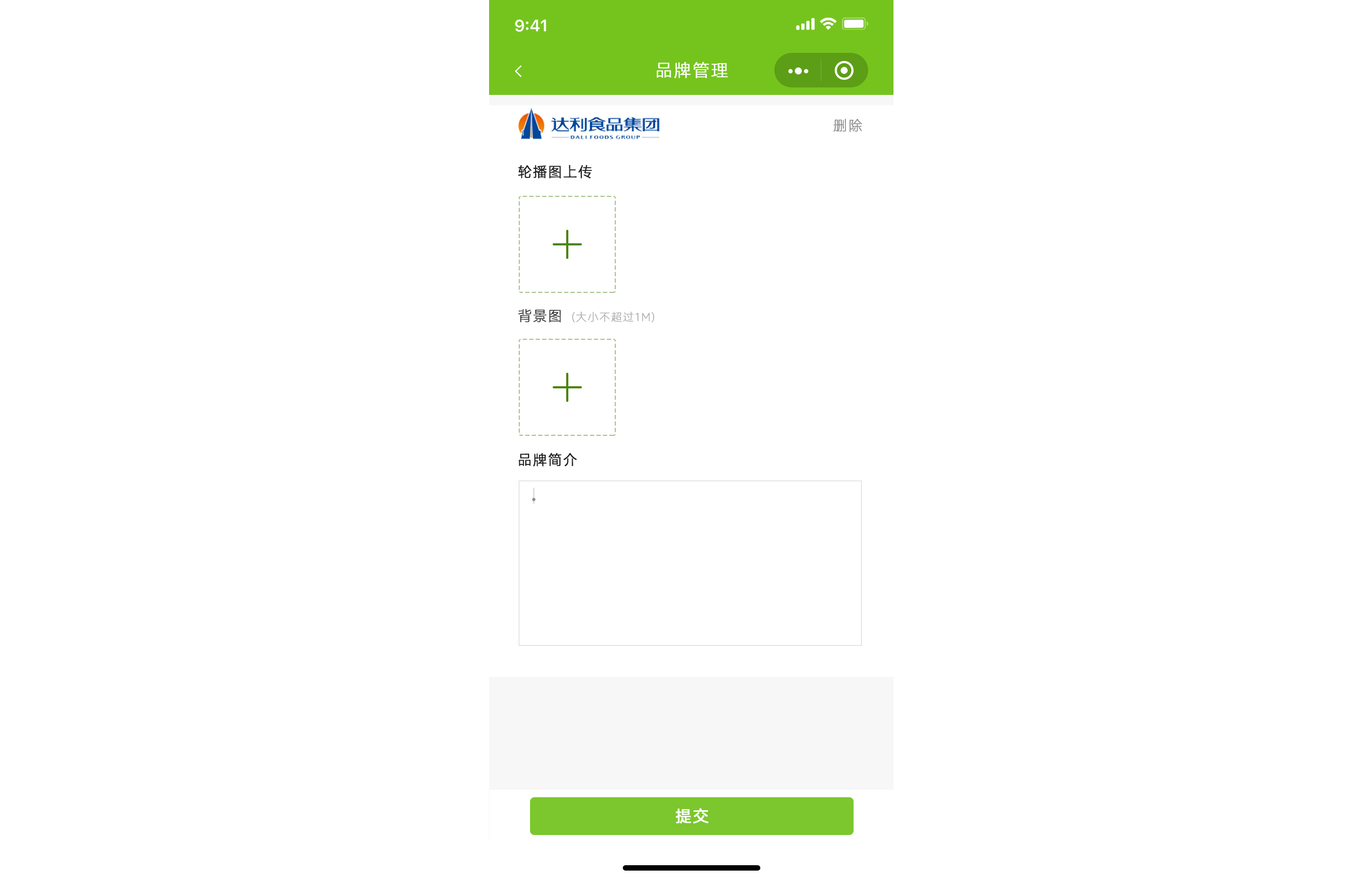
<style>
.page{position:relative;width:1361px;height:876px;background:#ffffff}
.page>*{position:absolute;margin:0}
.t1{font:17.3px "HarmonyOS_Sans_SC_Light";letter-spacing:0.04em;color:#ffffff;text-transform:uppercase;font-weight:bold}
.t2{font:14px "HarmonyOS_Sans_SC_Thin";letter-spacing:0.04em;color:#8d8d8d;text-transform:uppercase;font-weight:bold}
.t3{font:14px "HarmonyOS_Sans_SC_Light";letter-spacing:0.04em;color:#1c1c1c;text-transform:uppercase;font-weight:bold}
.t4{font:14px "HarmonyOS_Sans_SC_Thin";letter-spacing:0.04em;color:#1c1c1c;text-transform:uppercase;font-weight:bold}
.t5{font:10.8px "HarmonyOS_Sans_SC_Thin";letter-spacing:0.04em;color:#a7a7a7;text-transform:uppercase;font-weight:bold}
.t6{font:16.2px "HarmonyOS_Sans_SC";letter-spacing:0.04em;color:#ffffff;text-transform:uppercase;font-weight:bold}
</style>
<div class="page">
<p class="t1" style="left:657px;top:61px;width:71px;height:17px">品牌管理</p>
<p class="t2" style="left:833px;top:119px;width:29px;height:13px">删除</p>
<p class="t3" style="left:518px;top:165px;width:74px;height:14px">轮播图上传</p>
<p class="t4" style="left:518px;top:309px;width:43px;height:14px">背景图</p>
<p class="t5" style="left:572px;top:311px;width:83px;height:12px">(大小不超过1m)</p>
<p class="t3" style="left:519px;top:453px;width:58px;height:14px">品牌简介</p>
<p class="t6" style="left:676px;top:808px;width:33px;height:16px">提交</p>
</div>
